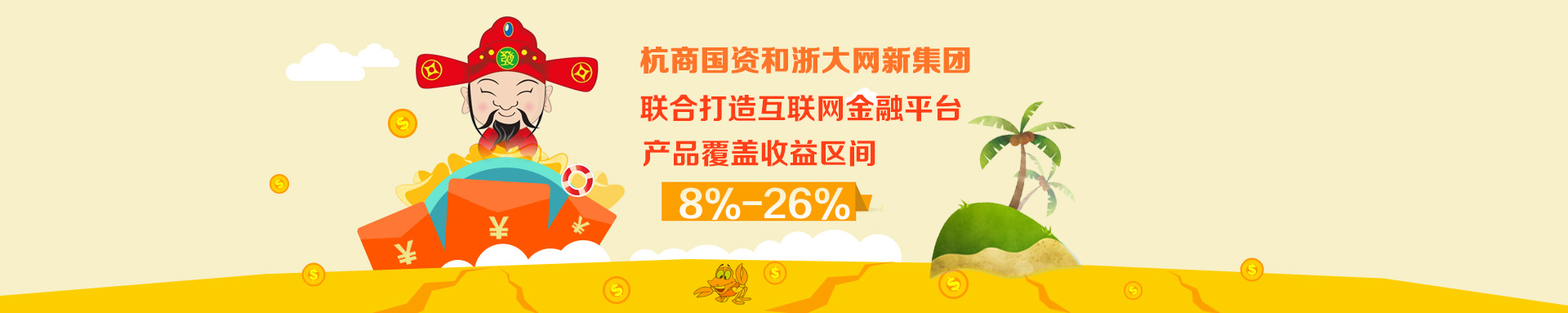
<style>
.page{position:relative;width:1568px;height:313px;background:#f8f0c9}
.page>*{position:absolute;margin:0}
.t1{font:29.4px "FZZCHJW--GB1-0";color:#fd7529;font-weight:bold}
.t2{font:29.4px "FZZCHJW--GB1-0";color:#ff3f17}
.t3{font:35.5px "FZZCHJW--GB1-0"}
</style>
<div class="page">
<p class="t1" style="left:640px;top:47px;width:330px;height:27px">杭商国资和浙大网新集团</p>
<p class="t2" style="left:640px;top:94px;width:321px;height:28px">联合打造互联网金融平台</p>
<p class="t2" style="left:644px;top:140px;width:231px;height:27px">产品覆盖收益区间</p>
<p class="t3" style="left:679px;top:187px;width:171px;height:33px">8%-26%</p>
</div>
